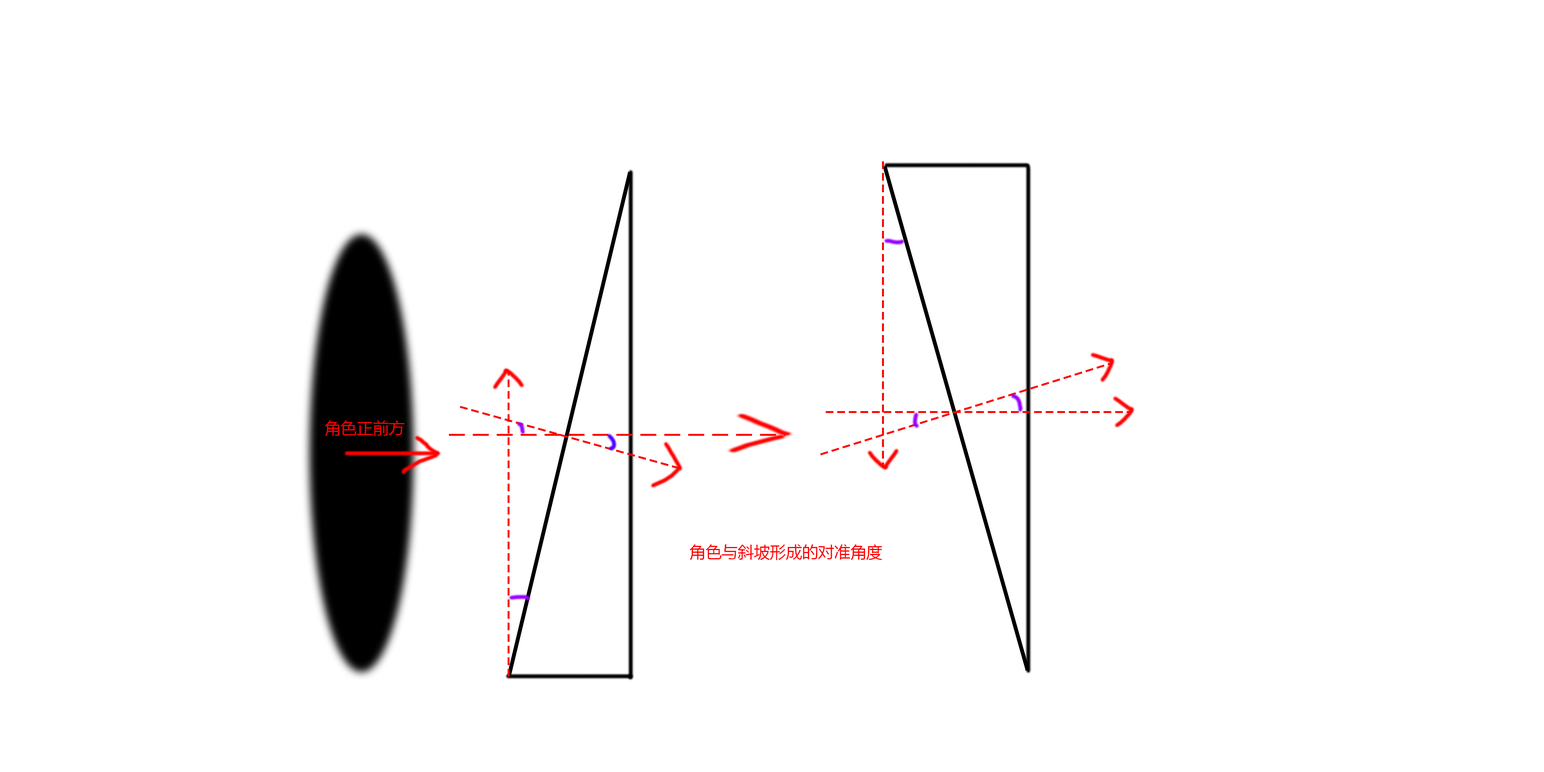
<style>
.page{position:relative;width:1544px;height:772px;background:#ffffff}
.page>*{position:absolute;margin:0}
.t1{font:16.1px "MicrosoftYaHei";color:#fc0000}
.t2{font:16.1px "MicrosoftYaHei";color:#000000}
.t3{font:16.1px "MicrosoftYaHei";color:#ff0000}
</style>
<div class="page">
<p class="t1" style="left:318px;top:420px;width:87px;height:18px"><span class="t2">j</span>角色正前方</p>
<p class="t3" style="left:690px;top:544px;width:193px;height:16px">角色与斜坡形成的对准角度</p>
</div>
